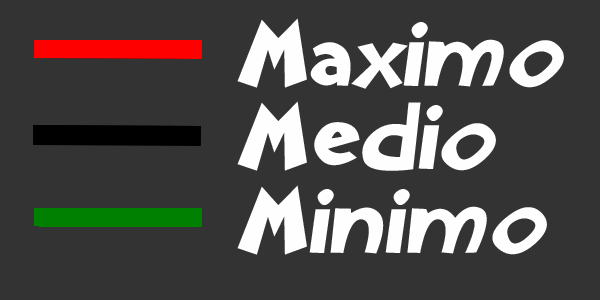
<style>
.page{position:relative;width:600px;height:300px;background:#333333}
.page>*{position:absolute;margin:0}
.t1{font:90.3px/83.3px "Aklatanic";letter-spacing:0.02em;color:#fffefe;font-style:italic}
</style>
<div class="page">
<p class="t1" style="left:237px;top:18px;width:327px;height:237px">Maximo<br>Medio<br>Minimo</p>
</div>
